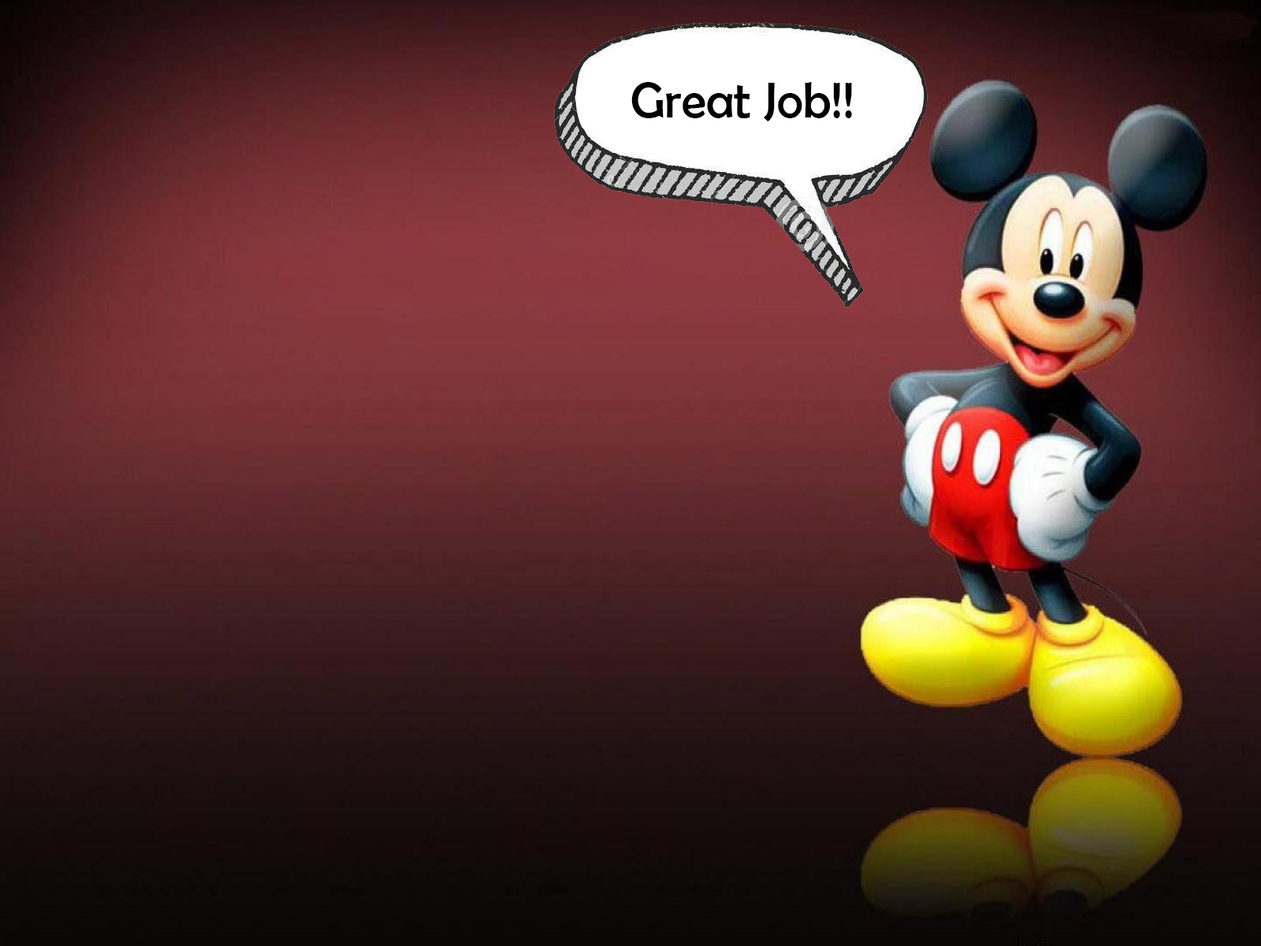
<style>
.page{position:relative;width:1261px;height:946px}
.page>*{position:absolute;margin:0}
.t1{font:50.4px "BerlinSansFB-Reg";color:#000000}
</style>
<div class="page">
<p class="t1" style="left:631px;top:82px;width:221px;height:39px">Great Job!!</p>
</div>
